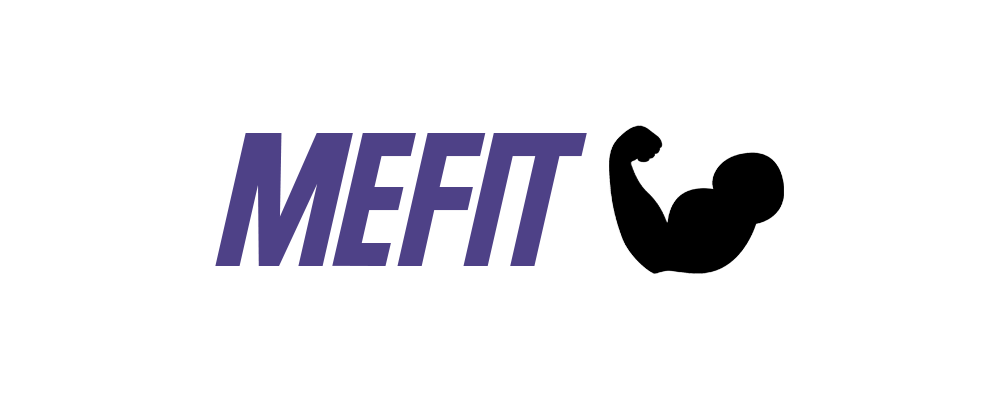
<style>
.page{position:relative;width:1000px;height:400px;background:#ffffff}
.page>*{position:absolute;margin:0}
.t1{font:187px "UraeNium";color:#4e4187}
</style>
<div class="page">
<p class="t1" style="left:215px;top:133px;width:372px;height:133px">MeFit</p>
</div>
